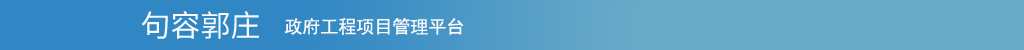
<style>
.page{position:relative;width:1024px;height:50px;background:#6aabc9}
.page>*{position:absolute;margin:0}
.t1{font:30px "SimHei";color:#fafafa}
.t2{font:18px "SimHei";color:#fafafa}
</style>
<div class="page">
<p class="t1" style="left:141px;top:11px;width:118px;height:28px">句容郭庄</p>
<p class="t2" style="left:284px;top:18px;width:180px;height:17px">政府工程项目管理平台</p>
</div>
